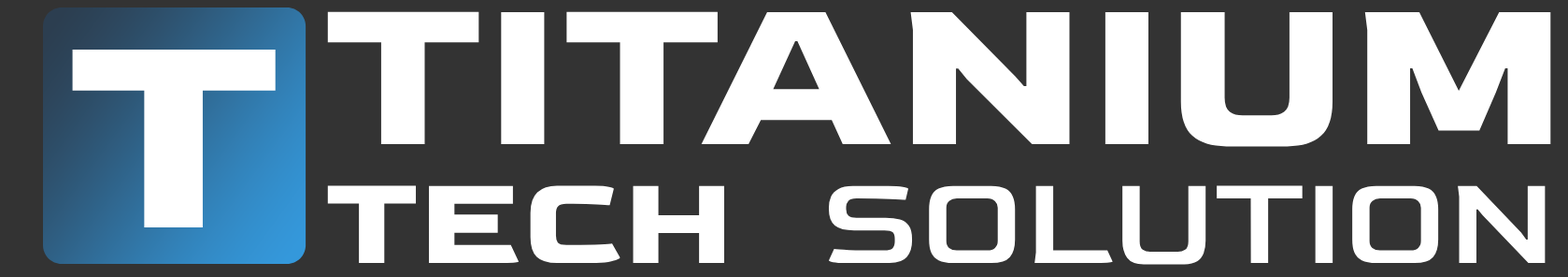
<style>
.page{position:relative;width:1568px;height:277px;background:#333333}
.page>*{position:absolute;margin:0}
.t1{font:224.3px "Goldman-Bold";color:#ffffff}
.t2{font:301.4px "Goldman-Bold";color:#ffffff}
.t3{font:130.8px "Goldman-Regular";color:#ffffff}
.t4{font:130.8px "Goldman-Bold";color:#ffffff}
</style>
<div class="page">
<p class="t1" style="left:327px;top:11px;width:1224px;height:136px">TITANIUM</p>
<p class="t2" style="left:72px;top:50px;width:204px;height:177px">T</p>
<p class="t3" style="left:327px;top:185px;width:1219px;height:79px"><span class="t4">TECH   </span>SOLUTION</p>
</div>
